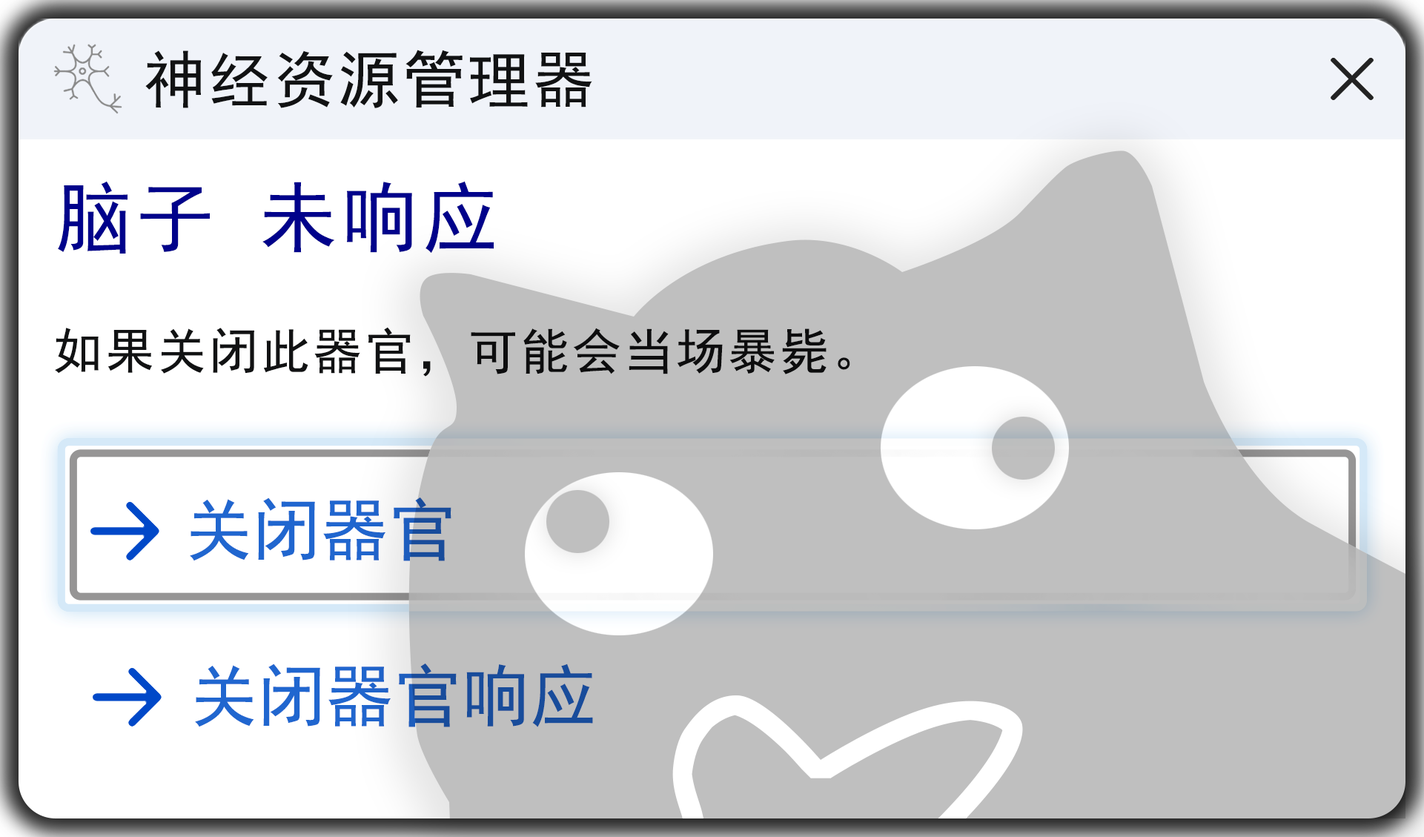
<style>
.page{position:relative;width:1424px;height:837px;background:#bfbfbf}
.page>*{position:absolute;margin:0}
.t1{font:61.8px "SimHei";letter-spacing:0.05em;color:#111213}
.t2{font:77.2px "SimHei";letter-spacing:0.05em;color:#00028b}
.t3{font:49.4px "SimHei";letter-spacing:0.05em;color:#111213}
.t4{font:68px "SimHei";color:#2066cf}
.t5{font:68px "SimHei"}
</style>
<div class="page">
<p class="t1" style="left:145px;top:50px;width:447px;height:58px">神经资源管理器</p>
<p class="t2" style="left:58px;top:181px;width:436px;height:73px">脑子 未响应</p>
<p class="t3" style="left:55px;top:327px;width:795px;height:50px">如果关闭此器官，可能会当场暴毙。</p>
<p class="t4" style="left:190px;top:498px;width:262px;height:63px">关闭器官</p>
<p class="t5" style="left:195px;top:664px;width:398px;height:63px">关闭器官响应</p>
</div>
